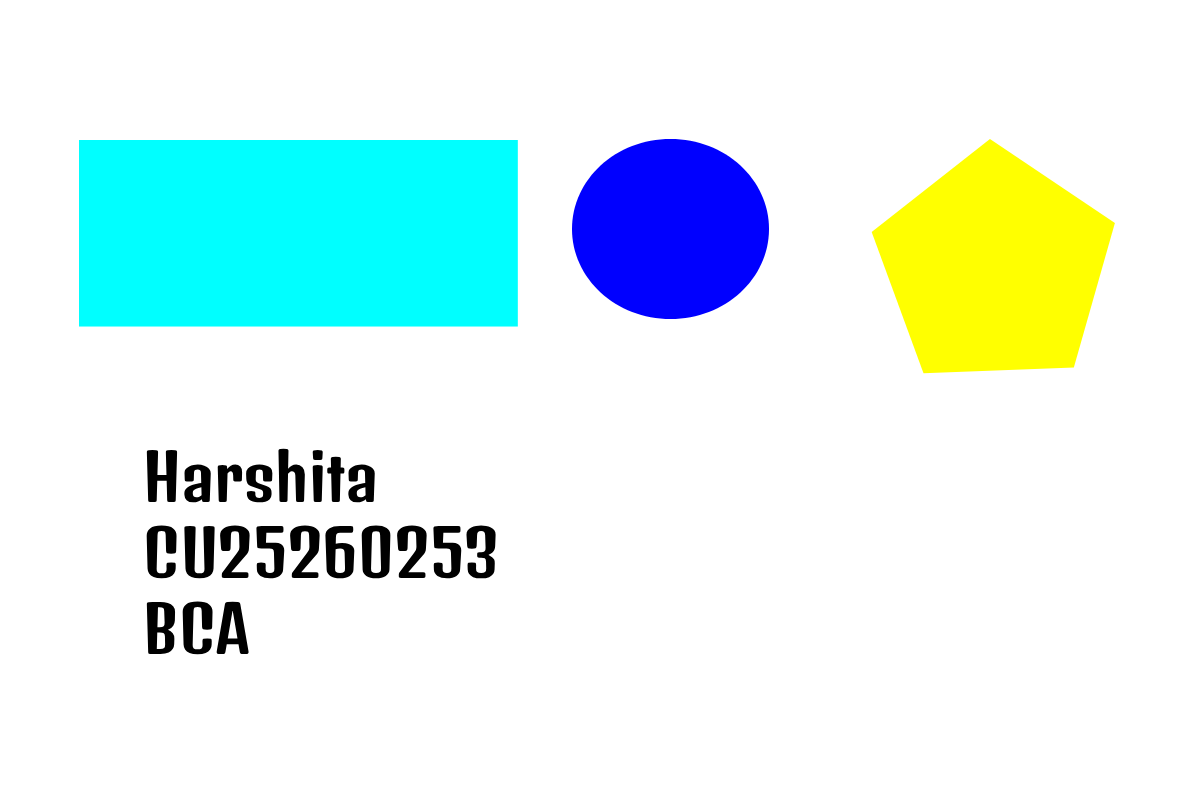
<style>
.page{position:relative;width:1200px;height:800px;background:#ffffff}
.page>*{position:absolute;margin:0}
.t1{font:63.1px "DenkOne-Regular";color:#000000}
</style>
<div class="page">
<p class="t1" style="left:146px;top:448px;width:350px;height:207px">Harshita <br>CU25260253<br>BCA</p>
</div>
